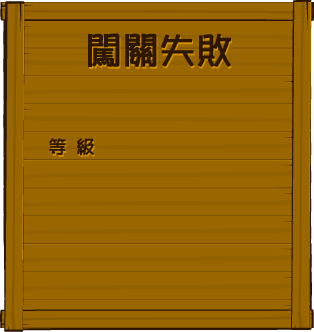
<style>
.page{position:relative;width:314px;height:332px;background:#996600}
.page>*{position:absolute;margin:0}
.t1{font:36px "Pop2EG-Bold-T-GB";color:#2e1700;font-weight:bold}
.t2{font:18px "Pop2EG-Bold-T-GB";color:#2e1700;font-weight:bold}
</style>
<div class="page">
<p class="t1" style="left:88px;top:33px;width:143px;height:34px">闯关失败</p>
<p class="t2" style="left:49px;top:138px;width:45px;height:18px">等 级</p>
</div>
